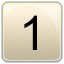
<style>
.page{position:relative;width:64px;height:64px}
.page>*{position:absolute;margin:0}
.t1{font:48px "ArialMT";color:#000000}
</style>
<div class="page">
<p class="t1" style="left:24px;top:15px;width:13px;height:35px">1</p>
</div>
